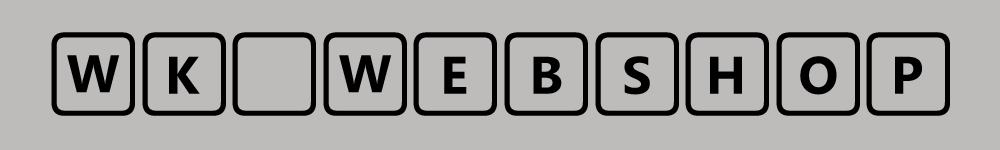
<style>
.page{position:relative;width:1000px;height:150px;background:#bebbbb}
.page>*{position:absolute;margin:0}
.t1{font:72px "SegoeKeycaps";color:#000000}
</style>
<div class="page">
<p class="t1" style="left:51px;top:32px;width:899px;height:84px">WK WEBSHOP</p>
</div>
